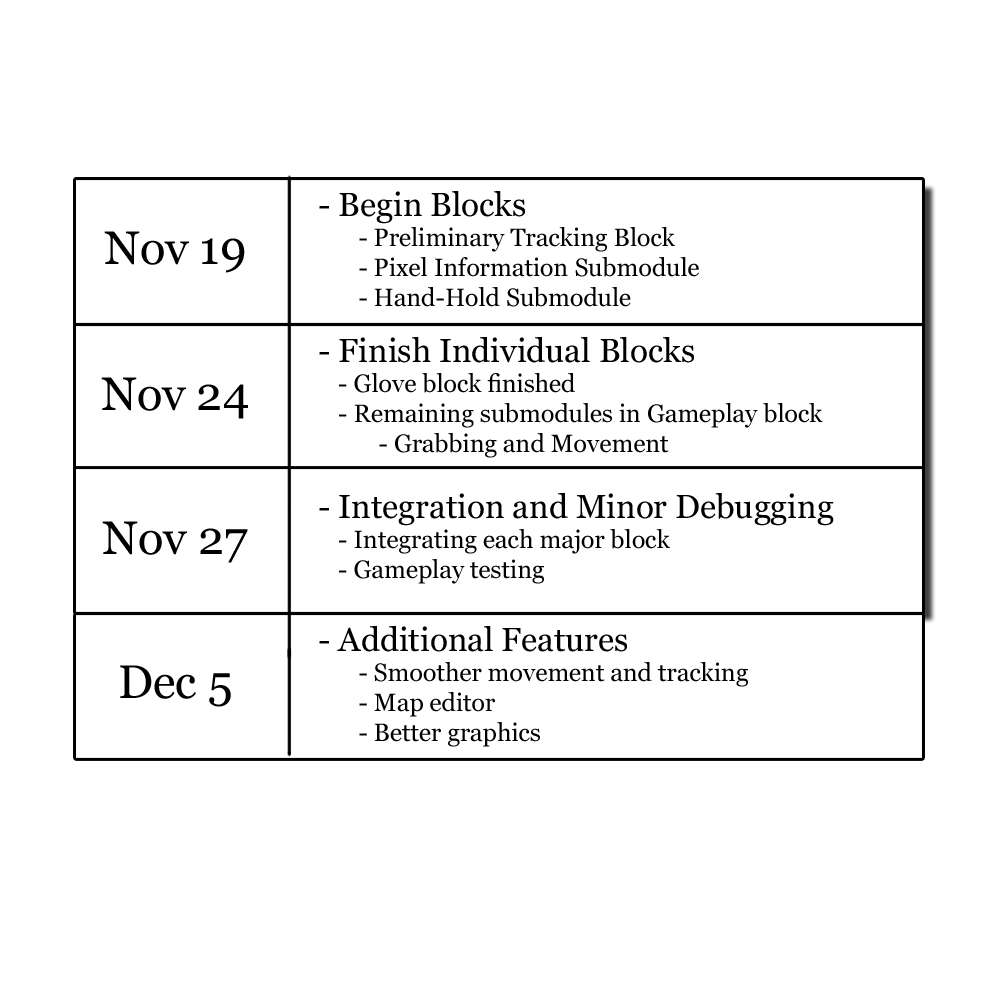
<style>
.page{position:relative;width:1000px;height:1000px;background:#ffffff}
.page>*{position:absolute;margin:0}
.t1{font:25px "Georgia";color:#000000}
.t2{font:33.3px "Georgia";color:#000000}
.t3{font:47px "Georgia";color:#000000}
</style>
<div class="page">
<p class="t1" style="left:319px;top:191px;width:380px;height:116px"><span class="t2">- Begin Blocks<br></span>  - Preliminary Tracking Block<br>  - Pixel Information Submodule<br>  - Hand-Hold Submodule</p>
<p class="t3" style="left:104px;top:231px;width:141px;height:42px">Nov 19</p>
<p class="t1" style="left:319px;top:336px;width:504px;height:122px"><span class="t2">- Finish Individual Blocks<br></span> - Glove block finished<br> - Remaining submodules in Gameplay block<br>   - Grabbing and Movement</p>
<p class="t3" style="left:101px;top:377px;width:147px;height:42px">Nov 24</p>
<p class="t1" style="left:319px;top:492px;width:515px;height:92px"><span class="t2">- Integration and Minor Debugging<br></span> - Integrating each major block<br> - Gameplay testing</p>
<p class="t3" style="left:102px;top:521px;width:146px;height:42px">Nov 27</p>
<p class="t1" style="left:319px;top:625px;width:429px;height:122px"><span class="t2">- Additional Features<br></span>  - Smoother movement and tracking<br>  - Map editor<br>  - Better graphics</p>
<p class="t3" style="left:120px;top:665px;width:111px;height:42px">Dec 5</p>
</div>
